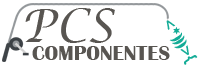
<style>
.page{position:relative;width:201px;height:67px;background:#ffffff}
.page>*{position:absolute;margin:0}
.t1{font:45.3px "LucidaCalligraphy-Italic";color:#585551}
.t2{font:15.5px "BernardMT-Condensed";color:#14ac97}
.t3{font:21px "BritannicBold";color:#585551}
</style>
<div class="page">
<p class="t1" style="left:25px;top:8px;width:90px;height:35px">PCS</p>
<p class="t2" style="left:166px;top:20px;width:32px;height:45px;rotate:58deg">&lt;*)))&gt;{</p>
<p class="t3" style="left:32px;top:46px;width:138px;height:14px">COMPONENTES</p>
</div>
